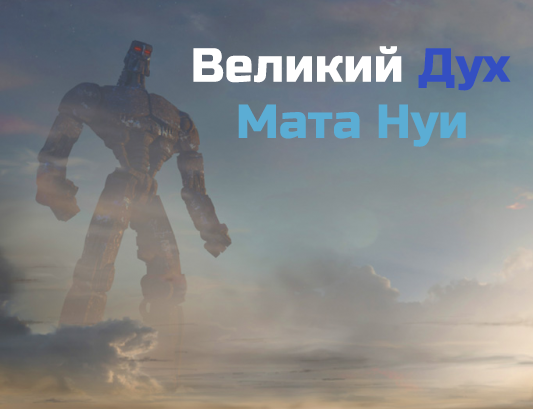
<style>
.page{position:relative;width:533px;height:409px}
.page>*{position:absolute;margin:0}
.t1{font:48px "RussoOne-Regular";color:#ffffff}
.t2{font:48px "RussoOne-Regular";color:#344fc2}
.t3{font:48px "RussoOne-Regular";color:#5badd4}
</style>
<div class="page">
<p class="t1" style="left:193px;top:46px;width:318px;height:45px">Великий <span class="t2">Дух</span></p>
<p class="t3" style="left:238px;top:104px;width:228px;height:43px">Мата Нуи</p>
</div>
